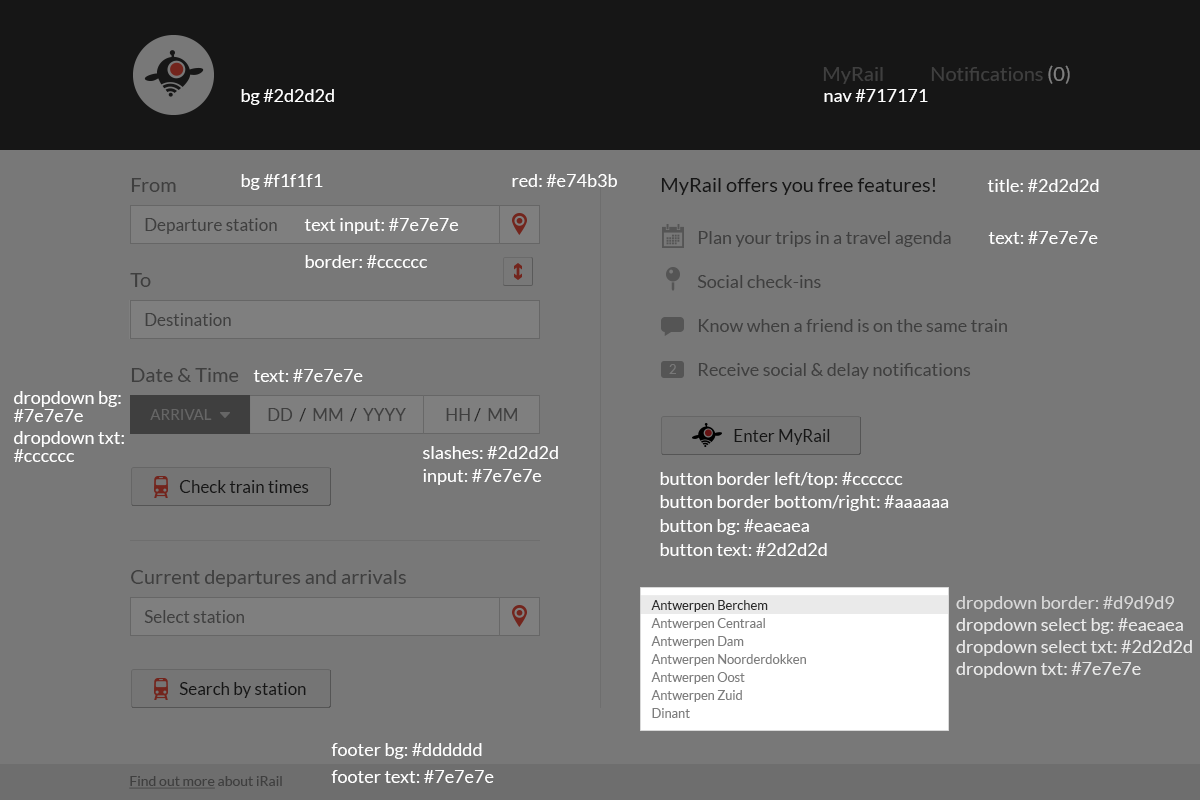
<style>
.page{position:relative;width:1200px;height:800px;background:#787878}
.page>*{position:absolute;margin:0}
.t1{font:20px "Lato-Regular";color:#3f3f3f}
.t2{font:18px "Lato-Regular";color:#ffffff}
.t3{font:20px "Lato-Regular";color:#161616}
.t4{font:17px "Lato-Regular";color:#3f3f3f}
.t5{font:18px "Lato-Regular";color:#3f3f3f}
.t6{font:18px/18px "Lato-Regular";color:#ffffff}
.t7{font:15px "Lato-Regular";color:#666666}
.t8{font:17px "Lato-Regular";color:#7e7e7e}
.t9{font:17px "Lato-Regular";color:#444444}
.t10{font:17px "Lato-Regular";color:#2d2d2d}
.t11{font:12.8px "Lato-Regular";color:#2d2d2d}
.t12{font:18px "Lato-Regular";color:#d9d9d9}
.t13{font:12.8px "Lato-Regular";color:#7e7e7e}
.t14{font:18px "Lato-Regular";color:#eaeaea}
.t15{font:14px "Lato-Regular";color:#3f3f3f;text-decoration:underline}
.t16{font:14px "Lato-Regular";color:#3f3f3f}
</style>
<div class="page">
<p class="t1" style="left:931px;top:65px;width:139px;height:19px">Notifications (0)</p>
<p class="t1" style="left:823px;top:67px;width:60px;height:17px">MyRail</p>
<p class="t2" style="left:241px;top:89px;width:93px;height:16px">bg #2d2d2d</p>
<p class="t2" style="left:824px;top:89px;width:104px;height:13px">nav #717171</p>
<p class="t2" style="left:241px;top:174px;width:82px;height:16px">bg #f1f1f1</p>
<p class="t2" style="left:512px;top:174px;width:105px;height:13px">red: #e74b3b</p>
<p class="t1" style="left:131px;top:178px;width:45px;height:14px">From</p>
<p class="t3" style="left:661px;top:178px;width:275px;height:17px">MyRail offers you free features!</p>
<p class="t2" style="left:987px;top:179px;width:112px;height:13px">title: #2d2d2d</p>
<p class="t4" style="left:145px;top:218px;width:132px;height:16px">Departure station</p>
<p class="t2" style="left:304px;top:218px;width:155px;height:16px">text input: #7e7e7e</p>
<p class="t5" style="left:698px;top:231px;width:253px;height:16px">Plan your trips in a travel agenda</p>
<p class="t2" style="left:988px;top:231px;width:110px;height:13px">text: #7e7e7e</p>
<p class="t2" style="left:305px;top:255px;width:122px;height:13px">border: #cccccc</p>
<p class="t1" style="left:130px;top:273px;width:21px;height:14px">To</p>
<p class="t5" style="left:697px;top:275px;width:124px;height:13px">Social check-ins</p>
<p class="t4" style="left:145px;top:313px;width:86px;height:13px">Destination</p>
<p class="t5" style="left:698px;top:319px;width:309px;height:13px">Know when a friend is on the same train</p>
<p class="t5" style="left:698px;top:363px;width:273px;height:16px">Receive social &amp; delay notifications</p>
<p class="t1" style="left:131px;top:368px;width:108px;height:14px">Date &amp; Time</p>
<p class="t2" style="left:253px;top:369px;width:110px;height:13px">text: #7e7e7e</p>
<p class="t6" style="left:13px;top:391px;width:108px;height:31px">dropdown bg: <br>#7e7e7e</p>
<p class="t7" style="left:150px;top:409px;width:62px;height:11px">ARRIVAL</p>
<p class="t8" style="left:268px;top:408px;width:138px;height:14px">DD  <span class="t9">/</span>  MM  <span class="t9">/</span>  YYYY</p>
<p class="t8" style="left:446px;top:408px;width:71px;height:14px">HH <span class="t9">/</span>  MM</p>
<p class="t6" style="left:13px;top:431px;width:111px;height:31px">dropdown txt: <br>#cccccc</p>
<p class="t10" style="left:734px;top:429px;width:96px;height:16px">Enter MyRail</p>
<p class="t2" style="left:423px;top:446px;width:135px;height:13px">slashes: #2d2d2d</p>
<p class="t2" style="left:423px;top:469px;width:119px;height:16px">input: #7e7e7e</p>
<p class="t2" style="left:660px;top:472px;width:243px;height:16px">button border left/top: #cccccc</p>
<p class="t10" style="left:179px;top:480px;width:130px;height:13px">Check train times</p>
<p class="t2" style="left:660px;top:495px;width:289px;height:16px">button border bottom/right: #aaaaaa</p>
<p class="t2" style="left:660px;top:519px;width:149px;height:16px">button bg: #eaeaea</p>
<p class="t2" style="left:660px;top:543px;width:167px;height:13px">button text: #2d2d2d</p>
<p class="t1" style="left:131px;top:570px;width:275px;height:17px">Current departures and arrivals</p>
<p class="t11" style="left:651px;top:600px;width:117px;height:12px">Antwerpen Berchem</p>
<p class="t12" style="left:956px;top:596px;width:218px;height:16px">dropdown border: #d9d9d9</p>
<p class="t4" style="left:144px;top:610px;width:100px;height:13px">Select station</p>
<p class="t13" style="left:651px;top:618px;width:114px;height:12px">Antwerpen Centraal</p>
<p class="t14" style="left:956px;top:618px;width:227px;height:16px">dropdown select bg: #eaeaea</p>
<p class="t13" style="left:651px;top:636px;width:93px;height:12px">Antwerpen Dam</p>
<p class="t14" style="left:956px;top:640px;width:236px;height:16px">dropdown select txt: #2d2d2d</p>
<p class="t13" style="left:651px;top:654px;width:155px;height:12px">Antwerpen Noorderdokken</p>
<p class="t14" style="left:956px;top:662px;width:185px;height:16px">dropdown txt: #7e7e7e</p>
<p class="t13" style="left:651px;top:672px;width:94px;height:12px">Antwerpen Oost</p>
<p class="t10" style="left:179px;top:682px;width:127px;height:16px">Search by station</p>
<p class="t13" style="left:651px;top:690px;width:91px;height:12px">Antwerpen Zuid</p>
<p class="t13" style="left:652px;top:708px;width:38px;height:10px">Dinant</p>
<p class="t2" style="left:331px;top:743px;width:151px;height:16px">footer bg: #dddddd</p>
<p class="t2" style="left:331px;top:770px;width:163px;height:13px">footer text: #7e7e7e</p>
<p class="t15" style="left:129px;top:776px;width:153px;height:13px">Find out more<span class="t16"> about iRail</span></p>
</div>
